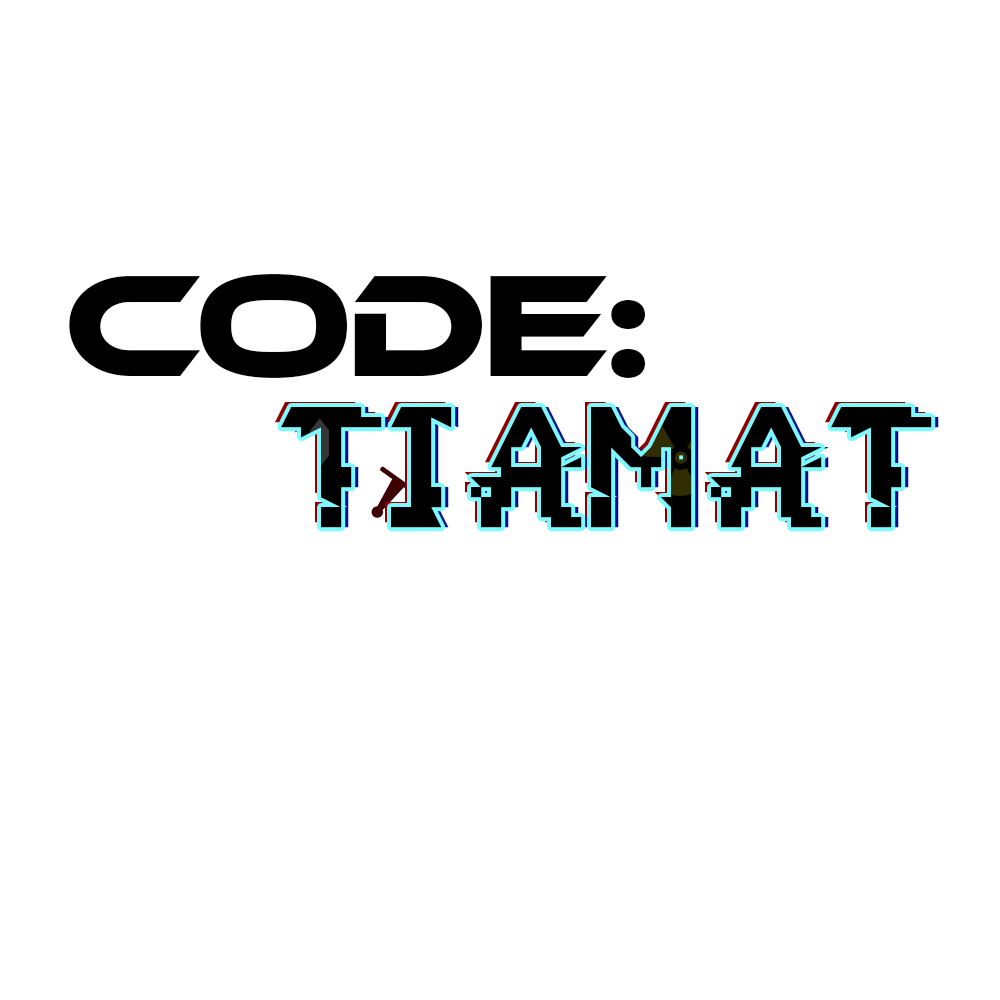
<style>
.page{position:relative;width:1000px;height:1000px;background:#ffffff}
.page>*{position:absolute;margin:0}
.t1{font:150px "Ethnocentric-Regular";letter-spacing:-0.05em;color:#000000}
.t2{font:160px "Glitch";color:#000000}
</style>
<div class="page">
<p class="t1" style="left:69px;top:274px;width:576px;height:104px">CODE:</p>
<p class="t2" style="left:275px;top:402px;width:651px;height:121px">TIAMAT</p>
<p class="t2" style="left:281px;top:407px;width:651px;height:121px">TIAMAT</p>
<p class="t2" style="left:288px;top:407px;width:651px;height:121px">TIAMAT</p>
</div>
